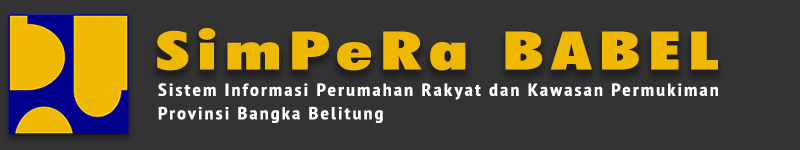
<style>
.page{position:relative;width:800px;height:150px;background:#333333}
.page>*{position:absolute;margin:0}
.t1{font:53.1px "FuturaBT-ExtraBlackCondensed";letter-spacing:0.105em;color:#efb803;scale:1.43 1}
.t2{font:17.4px/23.5px "PTSans-NarrowBold";letter-spacing:0.105em;color:#ffffff;scale:1.15 1}
</style>
<div class="page">
<p class="t1" style="left:157px;top:28px;width:561px;height:43px">SimPeRa BABEL</p>
<p class="t2" style="left:158px;top:83px;width:560px;height:40px">Sistem Informasi Perumahan Rakyat dan Kawasan Permukiman <br>Provinsi Bangka Belitung</p>
</div>
